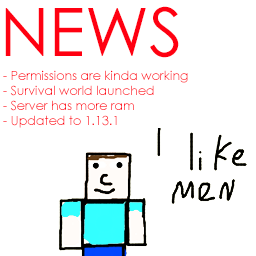
<style>
.page{position:relative;width:256px;height:256px;background:#ffffff}
.page>*{position:absolute;margin:0}
.t1{font:66.7px "CenturyGothic";color:#ff0011}
.t2{font:12.5px "CenturyGothic";color:#ff0011}
</style>
<div class="page">
<p class="t1" style="left:5px;top:6px;width:174px;height:52px">NEWS</p>
<p class="t2" style="left:3px;top:70px;width:185px;height:58px">- Permissions are kinda working<br>- Survival world launched<br>- Server has more ram<br>- Updated to 1.13.1</p>
</div>
